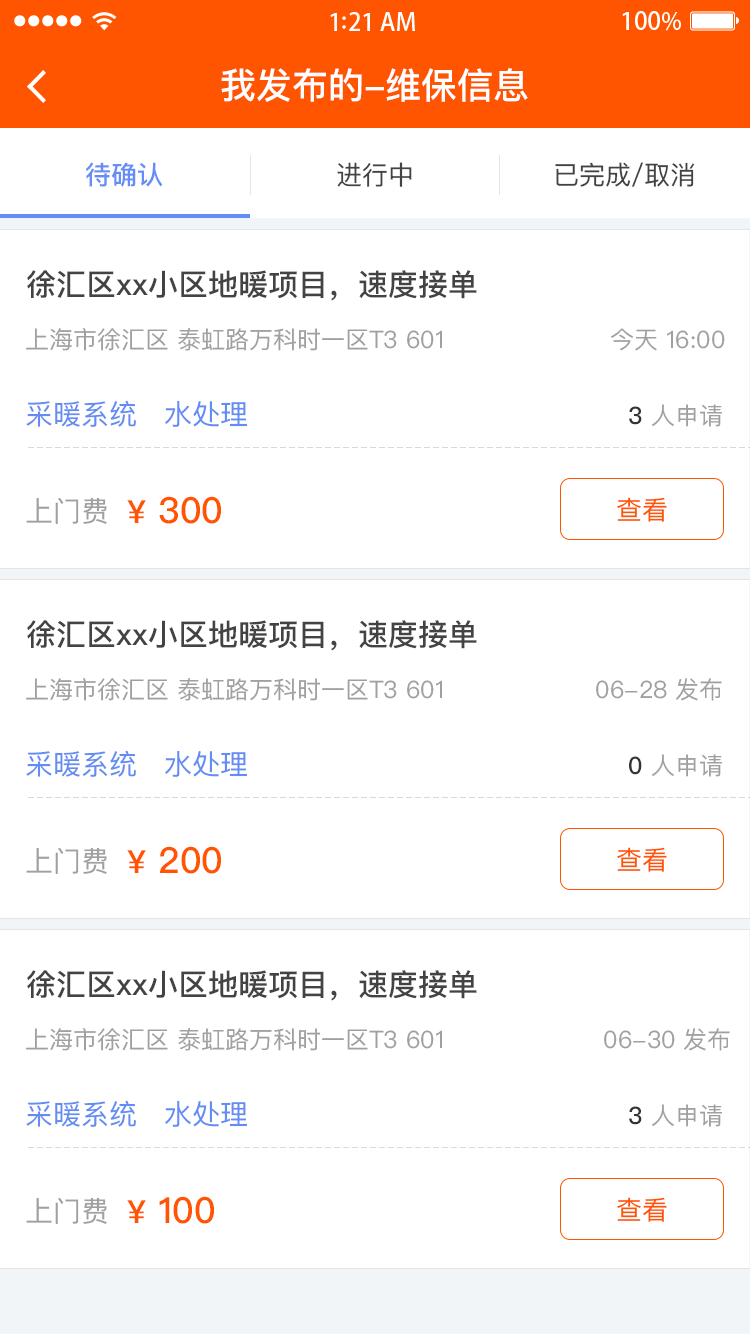
<style>
.page{position:relative;width:750px;height:1334px;background:#ffffff}
.page>*{position:absolute;margin:0}
.t1{font:36px "PingFangSC-Medium";color:#ffffff}
.t2{font:26px "PingFangSC-Medium";color:#648df6}
.t3{font:26px "PingFangSC-Regular";color:#434343}
.t4{font:30px "PingFangSC-Medium";color:#434343}
.t5{font:24px "PingFangSC-Regular";color:#a0a0a0}
.t6{font:28px "PingFangSC-Regular";color:#648df4}
.t7{font:24px "PingFangSC-Medium";color:#343434}
.t8{font:28px "PingFangSC-Regular";color:#a0a0a0}
.t9{font:36px "PingFangSC-Medium";color:#ff5400}
.t10{font:32px "PingFangSC-Medium";color:#ff5400}
.t11{font:26px "PingFangSC-Regular";color:#ff5400}
</style>
<div class="page">
<p class="t1" style="left:221px;top:68px;width:307px;height:34px">我发布的-维保信息</p>
<p class="t2" style="left:86px;top:162px;width:77px;height:25px">待确认</p>
<p class="t3" style="left:337px;top:162px;width:75px;height:25px">进行中</p>
<p class="t3" style="left:555px;top:162px;width:140px;height:25px">已完成/取消</p>
<p class="t4" style="left:27px;top:270px;width:450px;height:31px">徐汇区xx小区地暖项目，速度接单</p>
<p class="t5" style="left:26px;top:328px;width:416px;height:23px">上海市徐汇区 泰虹路万科时一区T3 601</p>
<p class="t5" style="left:611px;top:328px;width:114px;height:23px">今天 16:00</p>
<p class="t6" style="left:26px;top:400px;width:110px;height:27px">采暖系统</p>
<p class="t6" style="left:165px;top:400px;width:82px;height:27px">水处理</p>
<p class="t5" style="left:629px;top:404px;width:93px;height:23px"><span class="t7">3</span> 人申请</p>
<p class="t8" style="left:26px;top:497px;width:81px;height:27px">上门费</p>
<p class="t9" style="left:127px;top:496px;width:94px;height:28px"><span class="t10">¥</span> 300</p>
<p class="t11" style="left:617px;top:497px;width:50px;height:25px">查看</p>
<p class="t4" style="left:27px;top:620px;width:450px;height:31px">徐汇区xx小区地暖项目，速度接单</p>
<p class="t5" style="left:26px;top:678px;width:416px;height:23px">上海市徐汇区 泰虹路万科时一区T3 601</p>
<p class="t5" style="left:596px;top:678px;width:126px;height:23px">06-28 发布</p>
<p class="t6" style="left:26px;top:750px;width:110px;height:27px">采暖系统</p>
<p class="t6" style="left:165px;top:750px;width:82px;height:27px">水处理</p>
<p class="t5" style="left:629px;top:754px;width:93px;height:23px"><span class="t7">0</span> 人申请</p>
<p class="t9" style="left:127px;top:846px;width:94px;height:28px"><span class="t10">¥</span> 200</p>
<p class="t8" style="left:26px;top:847px;width:81px;height:27px">上门费</p>
<p class="t11" style="left:617px;top:847px;width:50px;height:25px">查看</p>
<p class="t4" style="left:27px;top:970px;width:450px;height:31px">徐汇区xx小区地暖项目，速度接单</p>
<p class="t5" style="left:26px;top:1028px;width:416px;height:23px">上海市徐汇区 泰虹路万科时一区T3 601</p>
<p class="t5" style="left:604px;top:1028px;width:126px;height:23px">06-30 发布</p>
<p class="t6" style="left:26px;top:1100px;width:110px;height:27px">采暖系统</p>
<p class="t6" style="left:165px;top:1100px;width:82px;height:27px">水处理</p>
<p class="t5" style="left:629px;top:1104px;width:93px;height:23px"><span class="t7">3</span> 人申请</p>
<p class="t8" style="left:26px;top:1197px;width:81px;height:27px">上门费</p>
<p class="t9" style="left:127px;top:1196px;width:87px;height:28px"><span class="t10">¥</span> 100</p>
<p class="t11" style="left:617px;top:1197px;width:50px;height:25px">查看</p>
</div>
